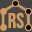
<style>
.page{position:relative;width:32px;height:32px;background:#444444}
.page>*{position:absolute;margin:0}
.t1{font:21px "BebasNeue-Regular";color:#cd985e}
</style>
<div class="page">
<p class="t1" style="left:8px;top:12px;width:16px;height:17px">RS</p>
</div>
